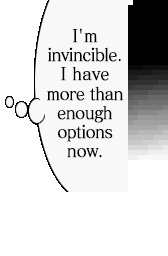
<style>
.page{position:relative;width:168px;height:256px;background:#ffffff}
.page>*{position:absolute;margin:0}
.t1{font:17.6px "MatissePro-M";letter-spacing:-0.05em;color:#000000;font-weight:bold;scale:0.91 1}
.t2{font:17.6px "MatissePro-M";letter-spacing:-0.01em;color:#000000;font-weight:bold;scale:0.91 1}
.t3{font:17.6px "MatissePro-M";letter-spacing:-0.025em;color:#000000;font-weight:bold;scale:0.91 1}
</style>
<div class="page">
<p class="t1" style="left:47px;top:28px;width:77px;height:130px;text-align:center"><span class="t2">I'm<br></span>invincible.<br><span class="t2">I have<br></span>more than<br>enough<br>options<br><span class="t3">now.</span></p>
</div>
